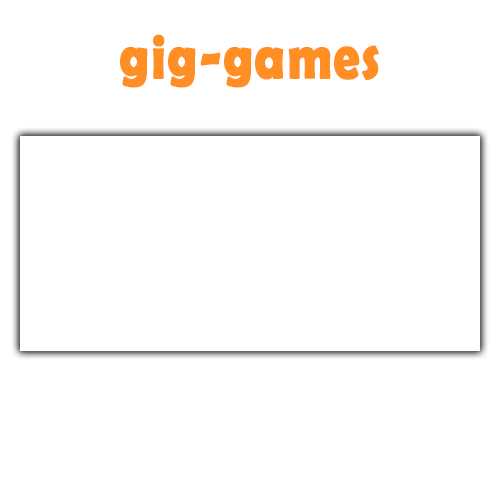
<style>
.page{position:relative;width:500px;height:500px;background:#ffffff}
.page>*{position:absolute;margin:0}
.t1{font:64px "BerlinSansFBDemi-Bold";letter-spacing:0.025em;color:#ff8e24;font-weight:bold;scale:0.79 1}
</style>
<div class="page">
<p class="t1" style="left:120px;top:34px;width:259px;height:54px">gig-games</p>
</div>
